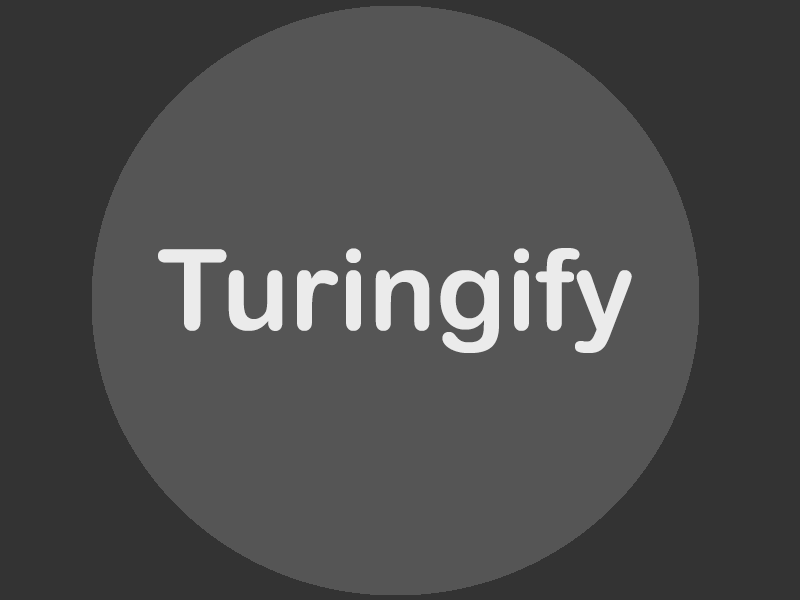
<style>
.page{position:relative;width:800px;height:600px;background:#555555}
.page>*{position:absolute;margin:0}
.t1{font:112px "ArialRoundedMTBold";color:#ebebeb}
</style>
<div class="page">
<p class="t1" style="left:158px;top:248px;width:474px;height:105px">Turingify</p>
</div>
